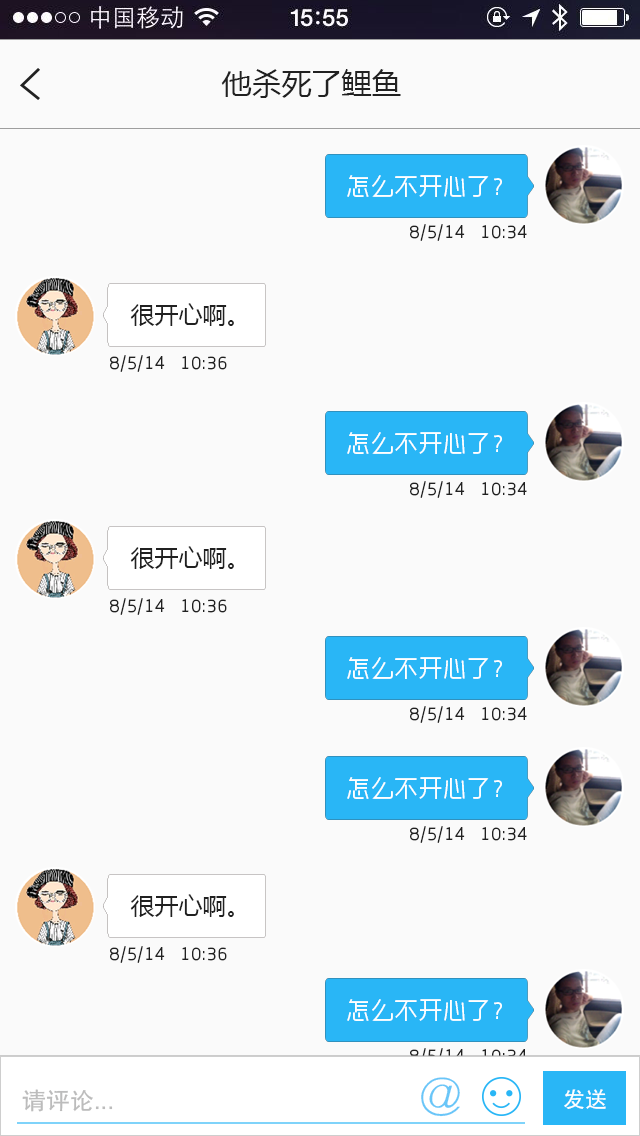
<style>
.page{position:relative;width:640px;height:1136px;background:#fafafa}
.page>*{position:absolute;margin:0}
.t1{font:30px "MicrosoftYaHei";color:#212121}
.t2{font:24px "RTWSYueGoDemo-Regular";letter-spacing:0.005em;color:#fefefe}
.t3{font:18px "RTWSYueGoDemo-Regular";letter-spacing:0.005em;color:#212121}
.t4{font:24px "MicrosoftYaHei";color:#212121}
.t5{font:18px "RTWSYueGoDemo-Regular";letter-spacing:0.005em}
.t6{font:44px "HYg3gj";color:#69c6f8}
.t7{font:24px "FZHTJW--GB1-0";color:#bcbcbc}
.t8{font:22px "FZHTJW--GB1-0";color:#ffffff}
</style>
<div class="page">
<p class="t1" style="left:221px;top:69px;width:180px;height:29px">他杀死了鲤鱼</p>
<p class="t2" style="left:347px;top:175px;width:155px;height:22px">怎么不开心了？</p>
<p class="t3" style="left:410px;top:224px;width:117px;height:17px">8/5/14   10:34</p>
<p class="t4" style="left:130px;top:303px;width:104px;height:23px">很开心啊。</p>
<p class="t3" style="left:110px;top:355px;width:117px;height:17px">8/5/14   10:36</p>
<p class="t2" style="left:347px;top:432px;width:155px;height:22px">怎么不开心了？</p>
<p class="t3" style="left:410px;top:481px;width:117px;height:17px">8/5/14   10:34</p>
<p class="t4" style="left:130px;top:546px;width:104px;height:23px">很开心啊。</p>
<p class="t3" style="left:110px;top:598px;width:117px;height:17px">8/5/14   10:36</p>
<p class="t2" style="left:347px;top:657px;width:155px;height:22px">怎么不开心了？</p>
<p class="t3" style="left:410px;top:706px;width:117px;height:17px">8/5/14   10:34</p>
<p class="t2" style="left:347px;top:777px;width:155px;height:22px">怎么不开心了？</p>
<p class="t3" style="left:410px;top:826px;width:117px;height:17px">8/5/14   10:34</p>
<p class="t4" style="left:130px;top:894px;width:104px;height:23px">很开心啊。</p>
<p class="t3" style="left:110px;top:946px;width:117px;height:17px">8/5/14   10:36</p>
<p class="t2" style="left:347px;top:999px;width:155px;height:22px">怎么不开心了？</p>
<p class="t5" style="left:410px;top:1048px;width:117px;height:17px">8/5/14   10:34</p>
<p class="t6" style="left:421px;top:1077px;width:39px;height:40px">@</p>
<p class="t7" style="left:22px;top:1089px;width:91px;height:23px">请评论...</p>
<p class="t8" style="left:564px;top:1089px;width:42px;height:20px">发送</p>
</div>
